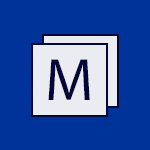
<style>
.page{position:relative;width:150px;height:150px;background:#003399}
.page>*{position:absolute;margin:0}
.t1{font:60px "MyriadPro-Regular";color:#040738}
</style>
<div class="page">
<p class="t1" style="left:48px;top:59px;width:42px;height:41px">M</p>
</div>
